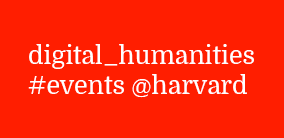
<style>
.page{position:relative;width:284px;height:138px;background:#ff1e00}
.page>*{position:absolute;margin:0}
.t1{font:24.8px "Domine-Regular";color:#ffffff}
</style>
<div class="page">
<p class="t1" style="left:28px;top:44px;width:226px;height:54px">digital_humanities<br>#events @harvard</p>
</div>
